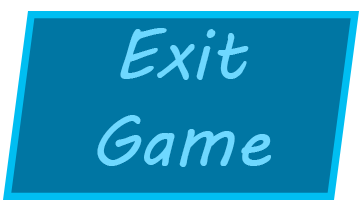
<style>
.page{position:relative;width:360px;height:216px;background:#0076a3}
.page>*{position:absolute;margin:0}
.t1{font:72px "MVBoli";color:#6ed9ff}
</style>
<div class="page">
<p class="t1" style="left:97px;top:28px;width:174px;height:139px;text-align:center">Exit Game</p>
</div>
